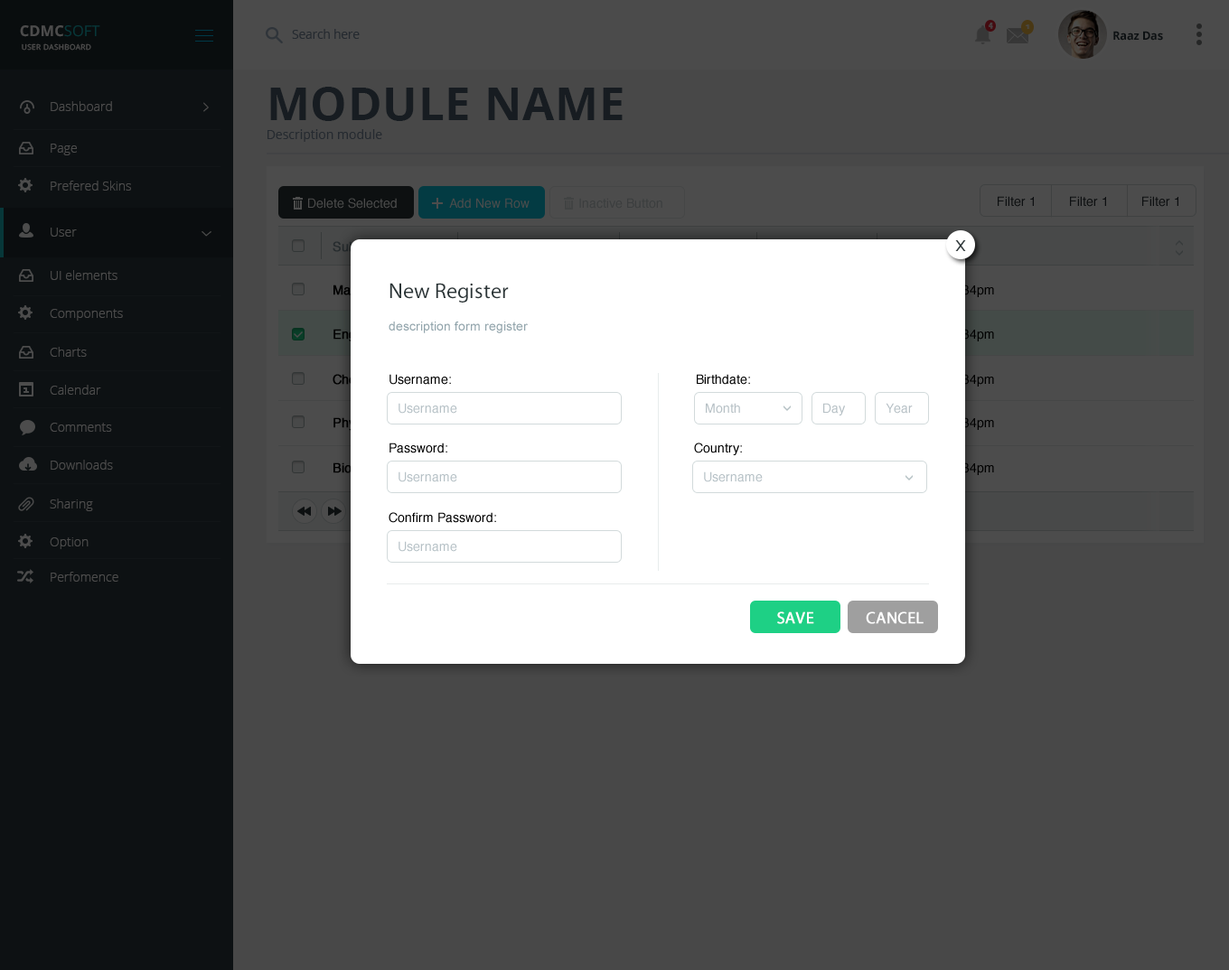
<style>
.page{position:relative;width:1229px;height:970px;background:#484848}
.page>*{position:absolute;margin:0}
.t1{font:15px "OpenSans-Bold";color:#4c4c4c}
.t2{font:15px "OpenSans";color:#4c4c4c}
.t3{font:12.6px "OpenSans";letter-spacing:-0.02em;color:#252a30}
.t4{font:8.6px "HelveticaNeueLTArabic-Bold";color:#494949;scale:0.9 1}
.t5{font:8px "HelveticaNeueLTArabic-Bold";color:#494848}
.t6{font:11.7px "OpenSans-Bold";letter-spacing:-0.02em;color:#0d1113}
.t7{font:7.5px "OpenSans";letter-spacing:0.04em}
.t8{font:12.6px/19px "OpenSans";color:#171c21}
.t9{font:46.1px "OpenSans-Bold";letter-spacing:0.015em;color:#171c21}
.t10{font:12.6px "OpenSans-Light";color:#4c4c4c}
.t11{font:18.6px "OpenSans-Light";scale:0.52 1}
.t12{font:20.8px "OpenSans-Light";color:#4c4c4c;scale:0.42 1}
.t13{font:19.9px "Tahoma";color:#2c3638}
.t14{font:21.7px "MyriadPro-Regular";color:#2c3638}
.t15{font:12.6px "ArialMT";color:#92a5ac}
.t16{font:12.6px "Helvetica";color:#000000}
.t17{font:12.6px "Helvetica";color:#b6c1c6}
.t18{font:12.6px "Helvetica";color:#b6c0c5}
.t19{font:16.3px "MyriadPro-Regular";color:#ffffff;font-weight:bold}
</style>
<div class="page">
<p class="t1" style="left:20px;top:25px;width:80px;height:12px">CDMC<span class="t2">SOFT</span></p>
<p class="t3" style="left:292px;top:29px;width:68px;height:10px">Search here</p>
<p class="t4" style="left:988px;top:23px;width:5px;height:6px">4</p>
<p class="t5" style="left:1026px;top:24px;width:4px;height:5px">1</p>
<p class="t6" style="left:1113px;top:31px;width:50px;height:10px">Raaz Das</p>
<p class="t7" style="left:22px;top:43px;width:69px;height:8px">USER DASHBOARD</p>
<p class="t8" style="left:267px;top:87px;width:356px;height:55px"><span class="t9">MODULE NAME<br></span>Description module</p>
<p class="t10" style="left:51px;top:101px;width:61px;height:10px">Dashboard</p>
<p class="t11" style="left:203px;top:102px;width:6px;height:10px">&gt;</p>
<p class="t10" style="left:51px;top:144px;width:26px;height:11px">Page</p>
<p class="t10" style="left:51px;top:181px;width:80px;height:10px">Prefered Skins</p>
<p class="t10" style="left:51px;top:228px;width:26px;height:9px">User</p>
<p class="t12" style="left:201px;top:231px;width:10px;height:6px;rotate:90deg">&gt;</p>
<p class="t13" style="left:955px;top:240px;width:11px;height:11px">x</p>
<p class="t10" style="left:51px;top:270px;width:66px;height:10px">UI elements</p>
<p class="t14" style="left:389px;top:283px;width:120px;height:20px">New Register</p>
<p class="t10" style="left:50px;top:309px;width:73px;height:12px">Components</p>
<p class="t15" style="left:389px;top:322px;width:139px;height:11px">description form register</p>
<p class="t10" style="left:50px;top:347px;width:37px;height:10px">Charts</p>
<p class="t16" style="left:389px;top:374px;width:62px;height:11px">Username:</p>
<p class="t16" style="left:697px;top:374px;width:53px;height:11px">Birthdate:</p>
<p class="t10" style="left:50px;top:385px;width:51px;height:10px">Calendar</p>
<p class="t17" style="left:398px;top:403px;width:59px;height:11px">Username</p>
<p class="t18" style="left:706px;top:403px;width:34px;height:11px">Month</p>
<p class="t18" style="left:823px;top:403px;width:22px;height:13px">Day</p>
<p class="t18" style="left:885px;top:403px;width:28px;height:11px">Year</p>
<p class="t10" style="left:50px;top:423px;width:62px;height:9px">Comments</p>
<p class="t16" style="left:389px;top:443px;width:58px;height:11px">Password:</p>
<p class="t16" style="left:694px;top:443px;width:48px;height:12px">Country:</p>
<p class="t10" style="left:51px;top:460px;width:62px;height:10px">Downloads</p>
<p class="t17" style="left:398px;top:472px;width:59px;height:10px">Username</p>
<p class="t17" style="left:704px;top:472px;width:59px;height:10px">Username</p>
<p class="t10" style="left:50px;top:499px;width:43px;height:12px">Sharing</p>
<p class="t16" style="left:389px;top:512px;width:107px;height:11px">Confirm Password:</p>
<p class="t10" style="left:50px;top:538px;width:39px;height:11px">Option</p>
<p class="t17" style="left:398px;top:541px;width:59px;height:11px">Username</p>
<p class="t10" style="left:51px;top:572px;width:67px;height:10px">Perfomence</p>
<p class="t19" style="left:777px;top:612px;width:37px;height:12px">SAVE</p>
<p class="t19" style="left:866px;top:612px;width:57px;height:12px">CANCEL</p>
</div>
